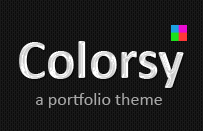
<style>
.page{position:relative;width:203px;height:131px;background:#191919}
.page>*{position:absolute;margin:0}
.t1{font:55px "Calibri-Bold"}
.t2{font:18px "Calibri";color:#a7a7a7}
</style>
<div class="page">
<p class="t1" style="left:19px;top:41px;width:165px;height:47px">Colorsy</p>
<p class="t2" style="left:36px;top:93px;width:126px;height:15px">a portfolio theme</p>
</div>
